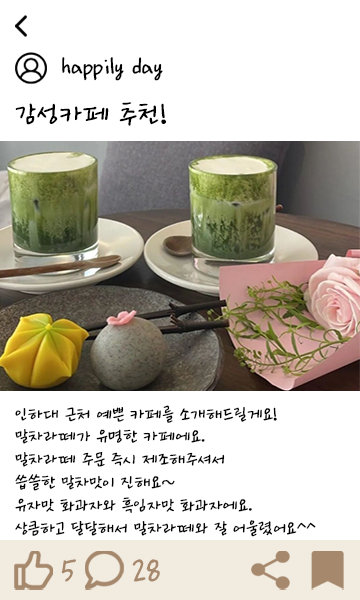
<style>
.page{position:relative;width:360px;height:600px;background:#ffffff}
.page>*{position:absolute;margin:0}
.t1{font:25px "Ownglyph_Dailyokja-Rg";color:#000000}
.t2{font:30px "Ownglyph_Dailyokja-Rg";color:#000000}
.t3{font:19px "Ownglyph_Dailyokja-Rg";color:#000000}
.t4{font:34px "Ownglyph_Dailyokja-Rg";color:#a6886d}
</style>
<div class="page">
<p class="t1" style="left:62px;top:57px;width:101px;height:24px">happily day</p>
<p class="t2" style="left:15px;top:102px;width:151px;height:24px">감성카페 추천!</p>
<p class="t3" style="left:15px;top:405px;width:301px;height:132px">인하대 근처 예쁜 카페를 소개해드릴게요!<br>말차라떼가 유명한 카페에요.<br>말차라떼 주문 즉시 제조해주셔서 <br>씁쓸한 말차맛이 진해요~<br>유자맛 화과자와 흑임자맛 화과자에요.<br>상큼하고 달달해서 말차라떼와 잘 어울렸어요^^</p>
<p class="t4" style="left:61px;top:559px;width:15px;height:23px">5</p>
<p class="t4" style="left:132px;top:559px;width:28px;height:23px">28</p>
</div>
